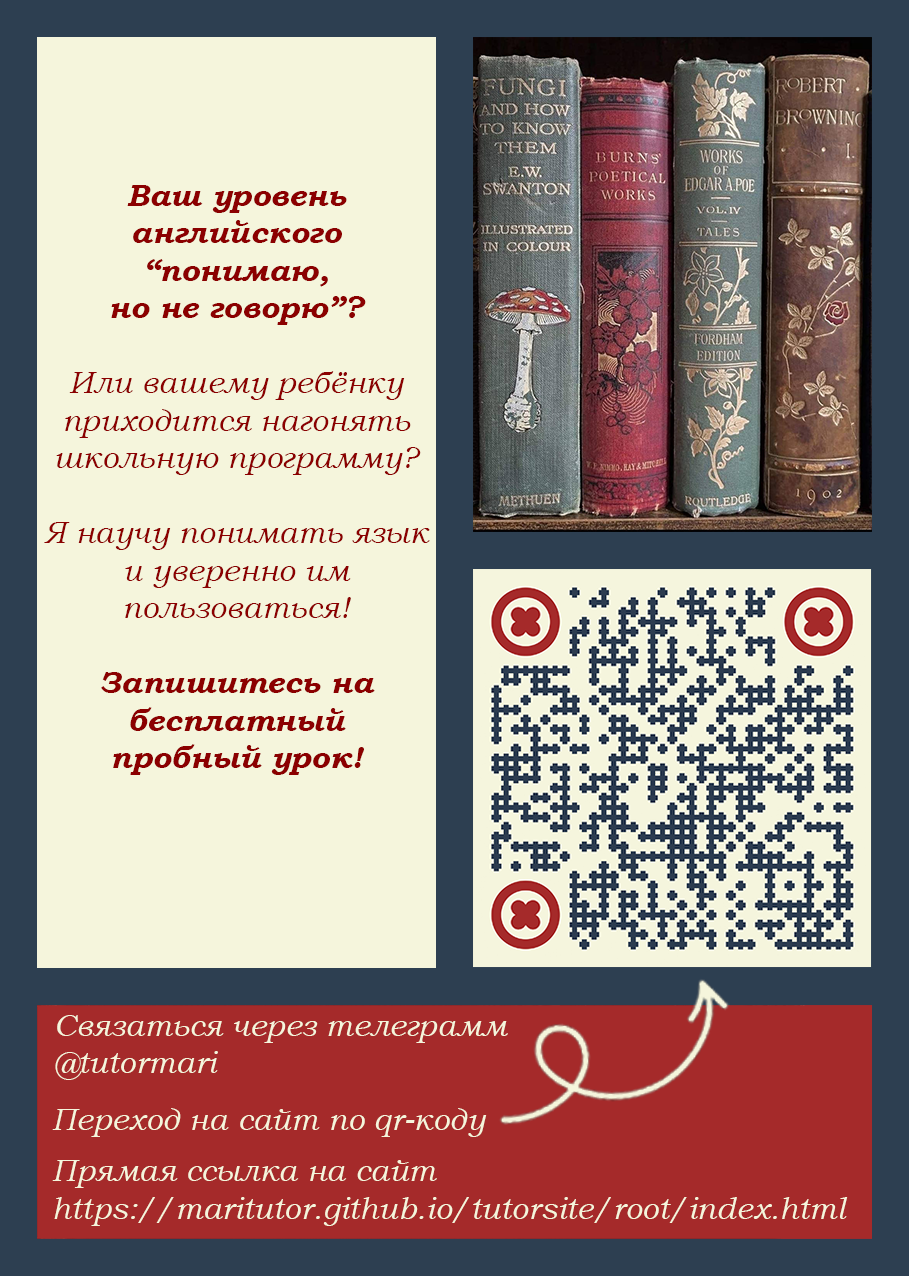
<style>
.page{position:relative;width:909px;height:1276px;background:#f5f5dc}
.page>*{position:absolute;margin:0}
.t1{font:31.2px "BookmanOldStyle-Italic";color:#8b0000}
.t2{font:31.2px "BookmanOldStyle-BoldItalic";color:#8b0000}
.t3{font:31.2px "BookmanOldStyle-Italic";color:#f5f5dc}
</style>
<div class="page">
<p class="t1" style="left:44px;top:185px;width:386px;height:590px;text-align:center"><span class="t2">Ваш уровень<br>английского<br>“понимаю,<br>но не говорю”?<br></span><br>Или вашему ребёнку<br>приходится нагонять<br>школьную программу?<br><br>Я научу понимать язык<br>и уверенно им<br>пользоваться!<br><br><span class="t2">Запишитесь на<br>бесплатный<br>пробный урок!</span></p>
<p class="t3" style="left:55px;top:1015px;width:453px;height:65px">Связаться через телеграмм<br>@tutormari</p>
<p class="t3" style="left:52px;top:1108px;width:435px;height:29px">Переход на сайт по qr-коду</p>
<p class="t3" style="left:52px;top:1160px;width:796px;height:66px">Прямая ссылка на сайт<br>https://maritutor.github.io/tutorsite/root/index.html</p>
</div>
